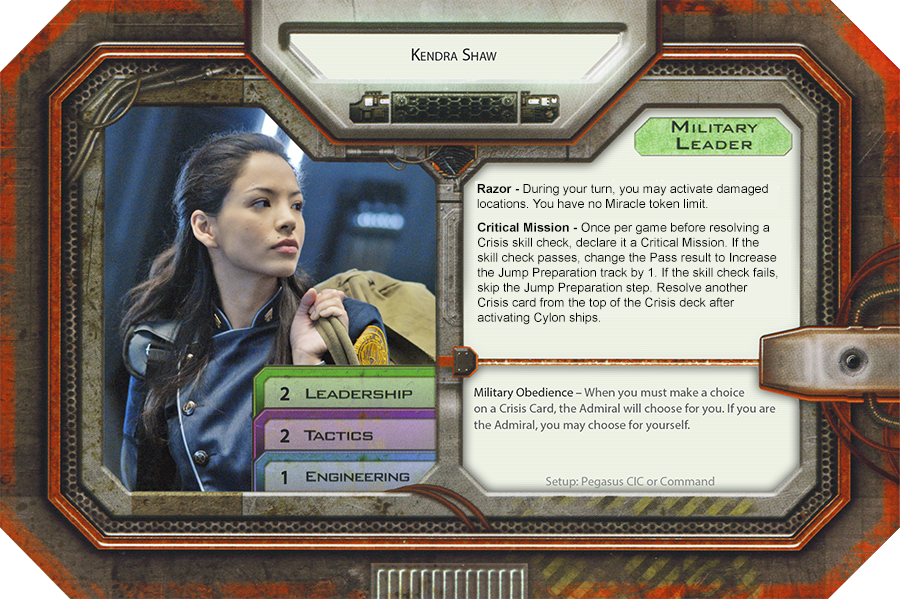
<style>
.page{position:relative;width:900px;height:599px}
.page>*{position:absolute;margin:0}
.t1{font:12.5px "ArialMT";color:#000000}
.t2{font:12.5px "Arial-BoldMT";color:#000000}
</style>
<div class="page">
<p class="t1" style="left:477px;top:184px;width:291px;height:24px"><span class="t2">Razor -</span> During your turn, you may activate damaged <br>locations. You have no Miracle token limit.</p>
<p class="t1" style="left:477px;top:222px;width:301px;height:103px"><span class="t2">Critical Mission -</span> Once per game before resolving a<br>Crisis skill check, declare it a Critical Mission. If the <br>skill check passes, change the Pass result to Increase <br>the Jump Preparation track by 1. If the skill check fails, <br>skip the Jump Preparation step. Resolve another <br>Crisis card from the top of the Crisis deck after <br>activating Cylon ships.</p>
</div>
